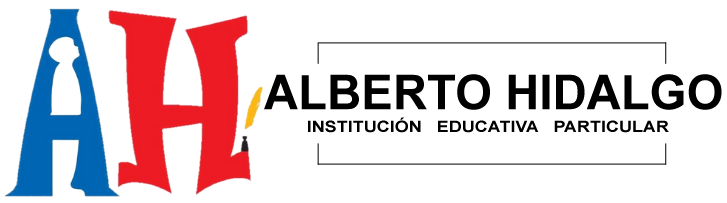
<style>
.page{position:relative;width:727px;height:203px;background:#ffffff}
.page>*{position:absolute;margin:0}
.t1{font:48px "Arial-BoldMT";color:#000000}
.t2{font:15.7px "Arial-BoldMT";color:#000000;scale:1.15 1}
</style>
<div class="page">
<p class="t1" style="left:264px;top:74px;width:458px;height:36px">ALBERTO HIDALGO</p>
<p class="t2" style="left:308px;top:117px;width:361px;height:16px">INSTITUCIÓN   EDUCATIVA   PARTICULAR</p>
</div>
